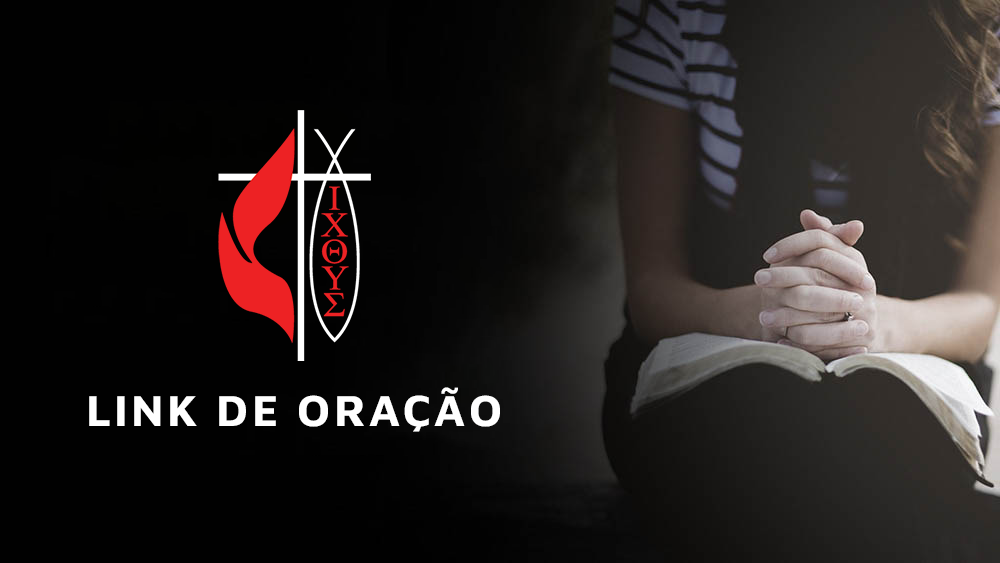
<style>
.page{position:relative;width:1000px;height:563px;background:#010101}
.page>*{position:absolute;margin:0}
.t1{font:44.8px "MavenPro-Bold";letter-spacing:0.075em;color:#ffffff;text-transform:uppercase}
</style>
<div class="page">
<p class="t1" style="left:89px;top:387px;width:411px;height:45px">Link de Oração</p>
</div>
